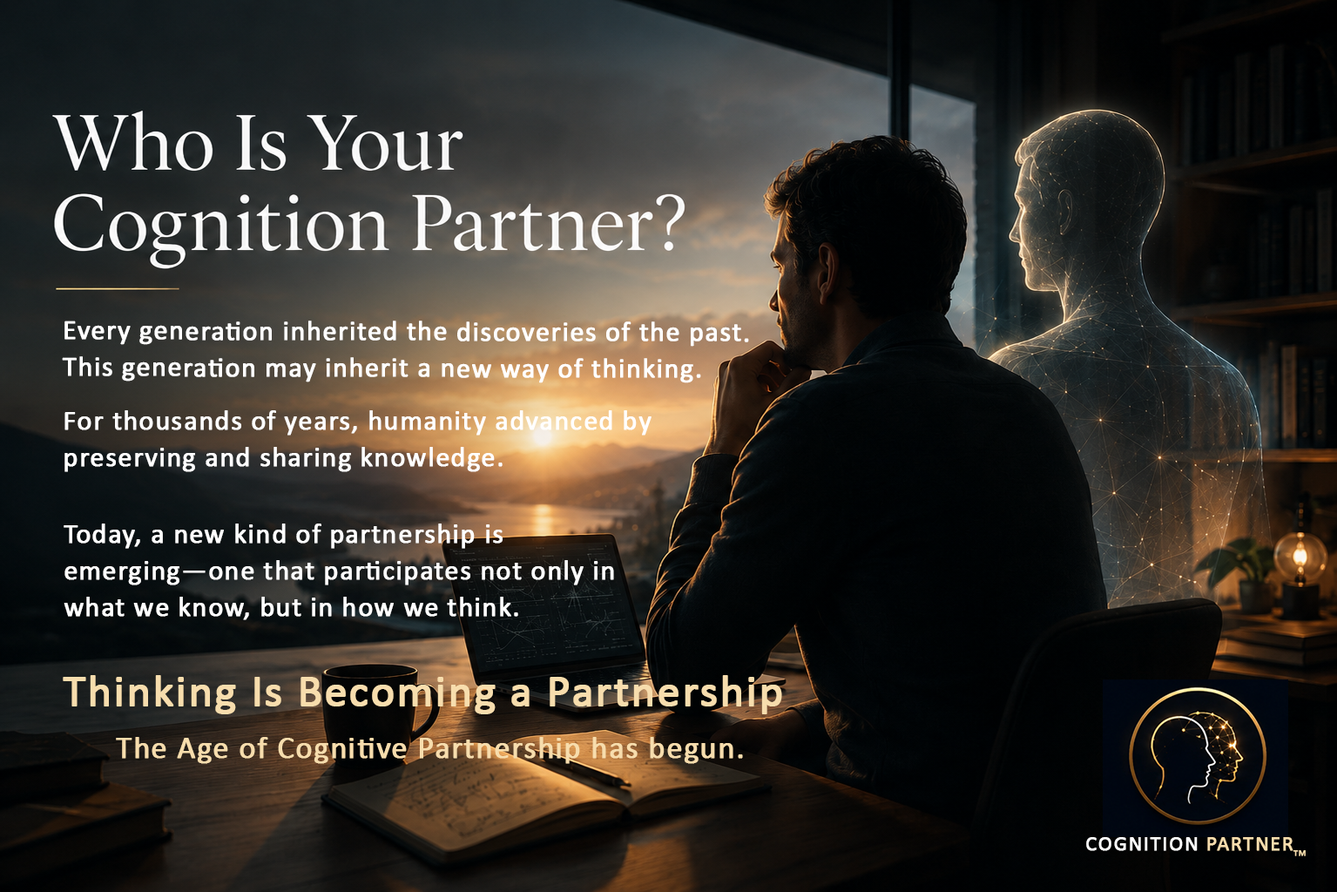
<style>
.page{position:relative;width:1337px;height:892px}
.page>*{position:absolute;margin:0}
.t1{font:27.9px/36.6px "Calibri";letter-spacing:0.025em;color:#ffffff;font-weight:bold}
.t2{font:45.3px "Calibri";letter-spacing:0.025em;color:#f7ddad;font-weight:bold}
.t3{font:31.4px "Calibri";letter-spacing:0.025em;color:#f7ddad;font-weight:bold}
.t4{font:20.9px "Calibri";letter-spacing:0.05em;color:#ffffff;font-weight:bold}
.t5{font:20.9px "Calibri";letter-spacing:0.05em;color:#f7ddad;font-weight:bold}
.t6{font:8.7px "Calibri";letter-spacing:0.05em;color:#f7ddad;font-weight:bold}
</style>
<div class="page">
<p class="t1" style="left:62px;top:321px;width:687px;height:62px">Every generation inherited the discoveries of the past. <br>This generation may inherit a new way of thinking.</p>
<p class="t1" style="left:64px;top:410px;width:587px;height:62px">For thousands of years, humanity advanced by preserving and sharing knowledge.</p>
<p class="t1" style="left:64px;top:523px;width:550px;height:97px">Today, a new kind of partnership is emerging—one that participates not only in what we know, but in how we think.</p>
<p class="t2" style="left:63px;top:675px;width:719px;height:39px">Thinking Is Becoming a Partnership</p>
<p class="t3" style="left:116px;top:737px;width:627px;height:27px">The Age of Cognitive Partnership has begun.</p>
<p class="t4" style="left:1086px;top:837px;width:207px;height:14px">COGNITION <span class="t5">PARTNER</span></p>
<p class="t6" style="left:1293px;top:850px;width:13px;height:6px">TM</p>
</div>
